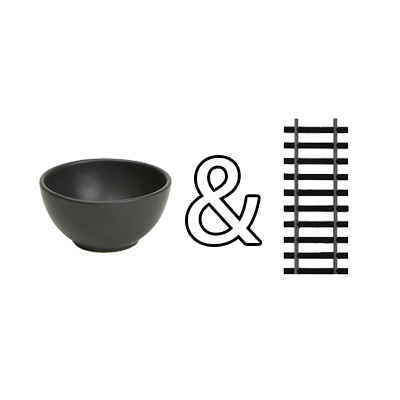
<style>
.page{position:relative;width:400px;height:400px;background:#ffffff}
.page>*{position:absolute;margin:0}
.t1{font:125px "MyriadPro-Regular";color:#ffffff}
</style>
<div class="page">
<p class="t1" style="left:188px;top:158px;width:72px;height:86px">&amp;</p>
</div>
